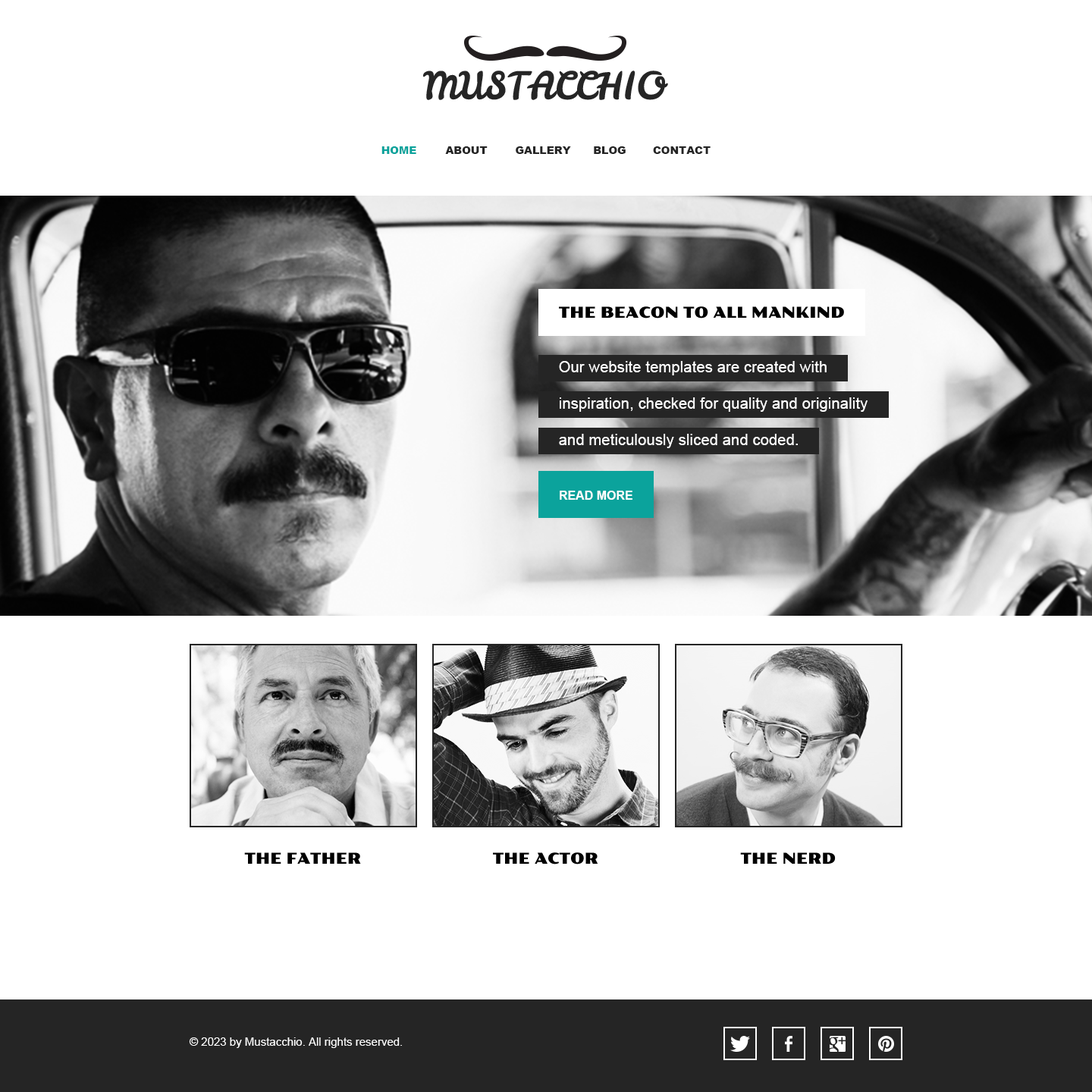
<style>
.page{position:relative;width:1092px;height:1092px;background:#ffffff}
.page>*{position:absolute;margin:0}
.t1{font:37.9px "LeckerliOne-Regular";color:#252525}
.t2{font:10.6px "Arial-Black";color:#0ba39c}
.t3{font:10.6px "Arial-Black";color:#252525}
.t4{font:15.2px "PollerOne-Regular";color:#000000}
.t5{font:15.2px/36.4px "ArialMT";letter-spacing:0.01em;color:#ffffff}
.t6{font:12.1px "Arial-BoldMT";color:#ffffff}
.t7{font:11.4px "ArialMT";color:#ffffff}
</style>
<div class="page">
<p class="t1" style="left:423px;top:71px;width:245px;height:29px">MUSTACCHIO</p>
<p class="t2" style="left:381px;top:146px;width:35px;height:8px">HOME</p>
<p class="t3" style="left:445px;top:146px;width:43px;height:8px">ABOUT</p>
<p class="t3" style="left:516px;top:146px;width:55px;height:8px">GALLERY</p>
<p class="t3" style="left:594px;top:146px;width:32px;height:8px">BLOG</p>
<p class="t3" style="left:653px;top:146px;width:58px;height:8px">CONTACT</p>
<p class="t4" style="left:559px;top:306px;width:285px;height:12px">THE BEACON TO ALL MANKIND</p>
<p class="t5" style="left:559px;top:361px;width:309px;height:87px">Our website templates are created with inspiration, checked for quality and originality and meticulously sliced and coded.</p>
<p class="t6" style="left:560px;top:491px;width:72px;height:9px">READ MORE</p>
<p class="t4" style="left:244px;top:852px;width:117px;height:12px">THE FATHER</p>
<p class="t4" style="left:493px;top:852px;width:105px;height:12px">THE ACTOR</p>
<p class="t4" style="left:740px;top:852px;width:96px;height:12px">THE NERD</p>
<p class="t7" style="left:189px;top:1037px;width:213px;height:11px">© 2023 by Mustacchio. All rights reserved.</p>
</div>
